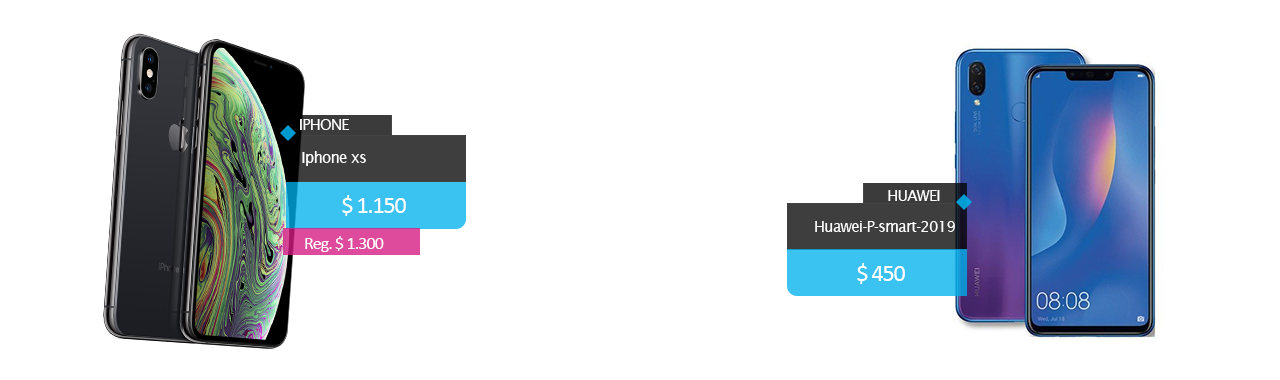
<style>
.page{position:relative;width:1280px;height:380px;background:#ffffff}
.page>*{position:absolute;margin:0}
.t1{font:15px "LucidaSans";letter-spacing:-0.05em;color:#fffefe}
.t2{font:24px "Calibri";letter-spacing:-0.05em;color:#ffffff}
.t3{font:18px "Calibri";letter-spacing:-0.05em;color:#ffffff}
</style>
<div class="page">
<p class="t1" style="left:300px;top:119px;width:50px;height:11px">IPHONE</p>
<p class="t1" style="left:302px;top:151px;width:64px;height:15px">Iphone xs</p>
<p class="t2" style="left:342px;top:195px;width:64px;height:21px">$ 1.150</p>
<p class="t1" style="left:888px;top:190px;width:52px;height:11px">HUAWEI</p>
<p class="t1" style="left:815px;top:221px;width:140px;height:11px">Huawei-P-smart-2019</p>
<p class="t3" style="left:305px;top:236px;width:79px;height:16px">Reg. $ 1.300</p>
<p class="t2" style="left:857px;top:263px;width:48px;height:21px">$ 450</p>
</div>
